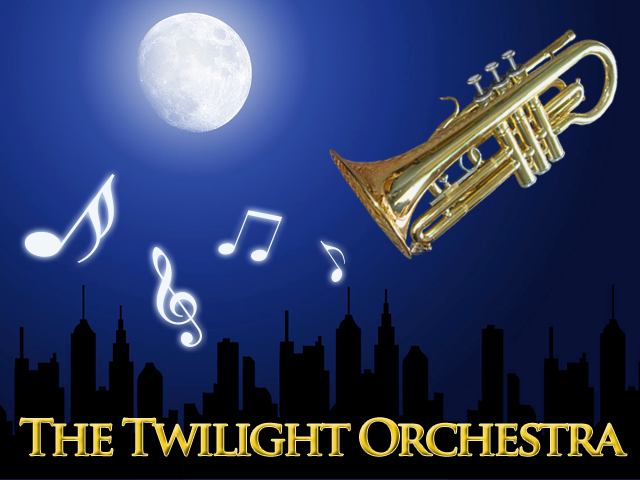
<style>
.page{position:relative;width:640px;height:480px}
.page>*{position:absolute;margin:0}
.t1{font:48px "TrajanPro-Bold";letter-spacing:-0.08em}
</style>
<div class="page">
<p class="t1" style="left:20px;top:418px;width:607px;height:38px">The Twilight Orchestra</p>
</div>
